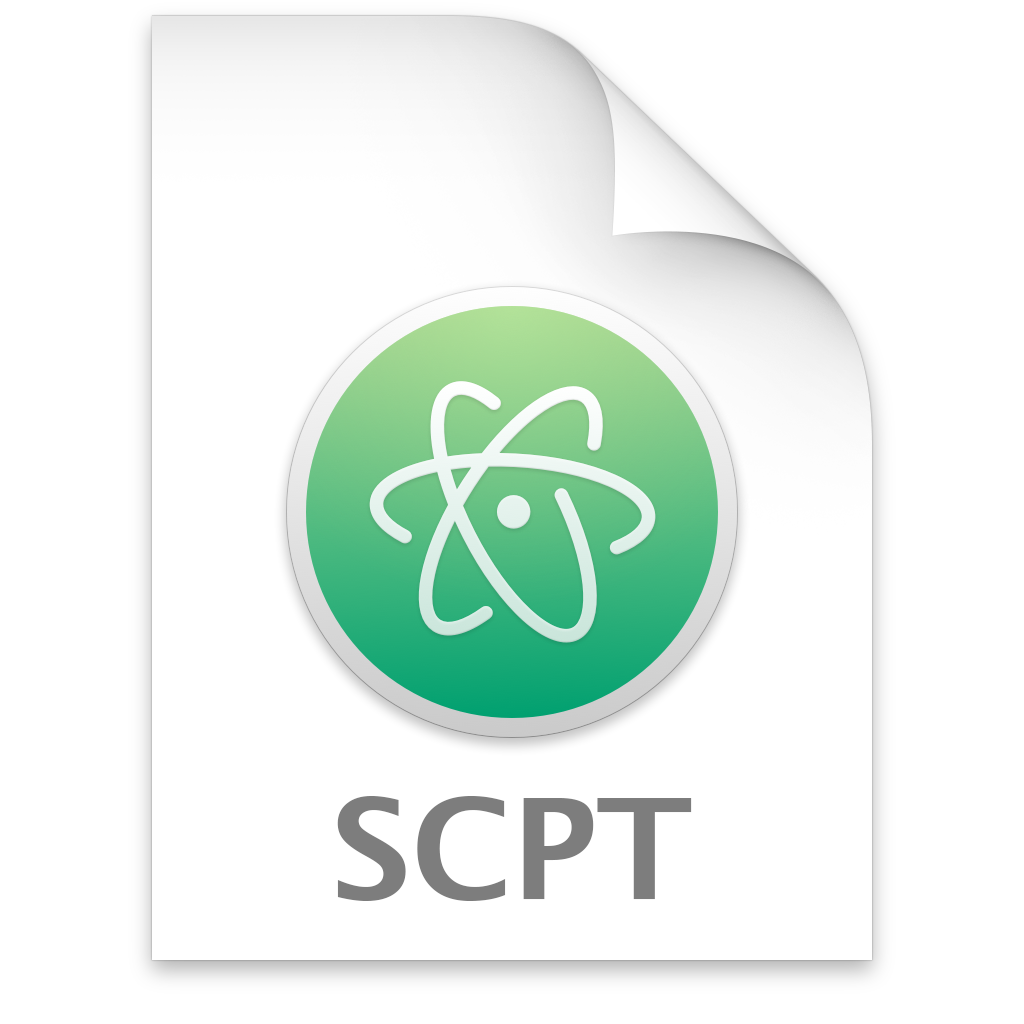
<style>
.page{position:relative;width:1024px;height:1024px;background:#ffffff}
.page>*{position:absolute;margin:0}
.t1{font:140px "LucidaGrande-Bold";color:#7d7d7d}
</style>
<div class="page">
<p class="t1" style="left:337px;top:796px;width:355px;height:105px">SCPT</p>
</div>
